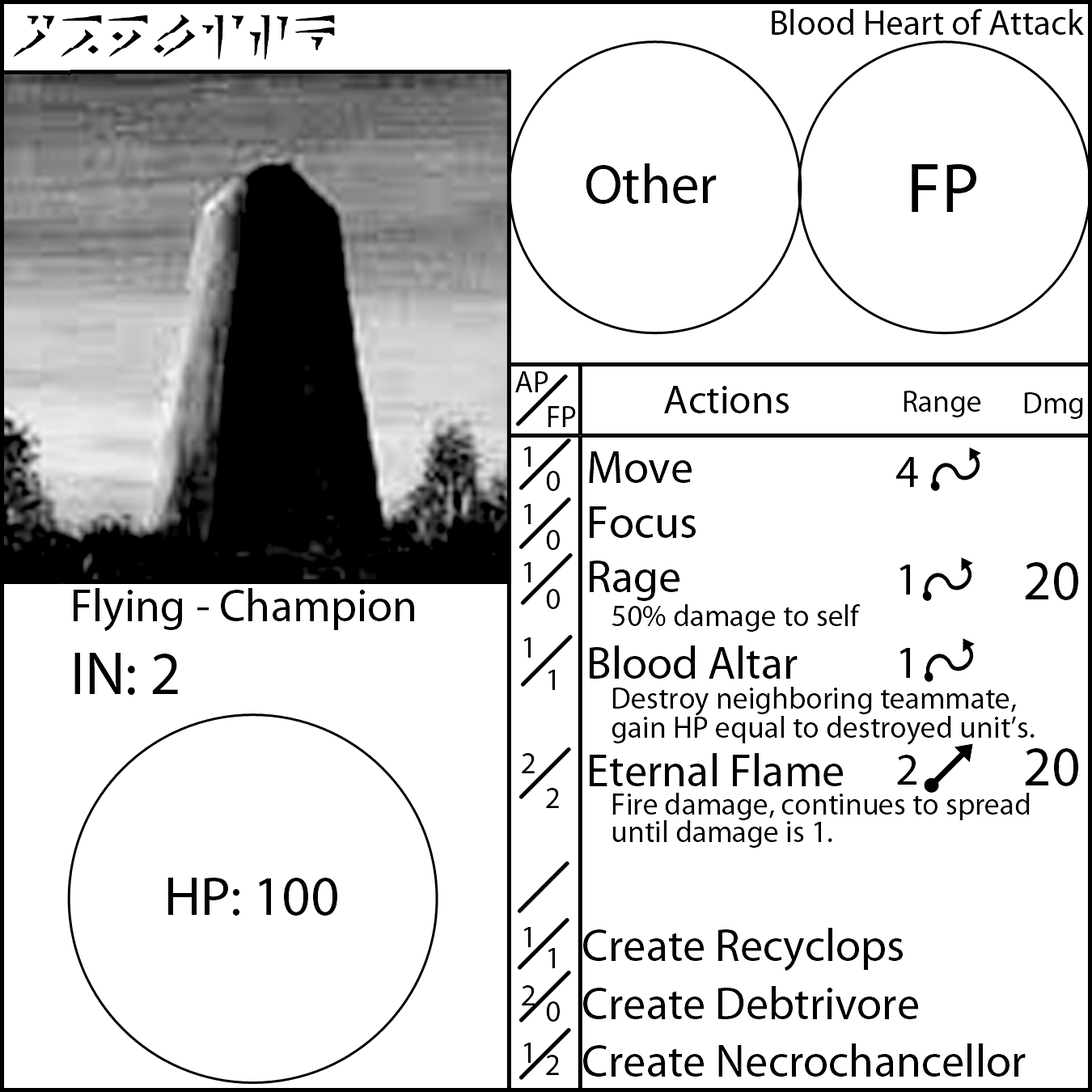
<style>
.page{position:relative;width:1092px;height:1092px;background:#ffffff}
.page>*{position:absolute;margin:0}
.t1{font:55.6px "Dovahkiin";color:#000000}
.t2{font:35.4px "MyriadPro-Regular";color:#000000}
.t3{font:55.6px "MyriadPro-Regular";color:#000000}
.t4{font:70.8px "MyriadPro-Regular";color:#000000}
.t5{font:30.3px "MyriadPro-Regular";color:#000000}
.t6{font:40.4px "MyriadPro-Regular";color:#000000}
.t7{font:45.5px "MyriadPro-Regular";color:#000000}
.t8{font:60.7px "MyriadPro-Regular";color:#000000}
</style>
<div class="page">
<p class="t1" style="left:14px;top:14px;width:321px;height:46px">obelisk</p>
<p class="t2" style="left:772px;top:9px;width:312px;height:26px">Blood Heart of Attack</p>
<p class="t3" style="left:586px;top:163px;width:131px;height:41px">Other</p>
<p class="t4" style="left:912px;top:164px;width:64px;height:48px">FP</p>
<p class="t5" style="left:515px;top:371px;width:33px;height:21px">AP</p>
<p class="t6" style="left:664px;top:386px;width:125px;height:27px">Actions</p>
<p class="t5" style="left:904px;top:391px;width:77px;height:26px">Range</p>
<p class="t5" style="left:1024px;top:392px;width:59px;height:27px">Dmg</p>
<p class="t5" style="left:548px;top:406px;width:28px;height:21px">FP</p>
<p class="t5" style="left:522px;top:447px;width:13px;height:616px">1<br>1<br>1 <br>1<br><br>2<br><br><br>1<br>2<br>1</p>
<p class="t5" style="left:583px;top:451px;width:452px;height:626px"><span class="t7">Move<br>Focus<br>Rage<br></span> 50% damage to self<br><span class="t7">Blood Altar<br></span> Destroy neighboring teammate, <br> gain HP equal to destroyed unit’s.<br><span class="t7">Eternal Flame<br></span> Fire damage, continues to spread <br> until damage is 1.<br><br><br><span class="t7">Create Recyclops<br>Create Debtrivore<br>Create Necrochancellor</span></p>
<p class="t7" style="left:896px;top:457px;width:22px;height:328px;text-align:center">4<br><br>1 <br>1<br><br>2</p>
<p class="t5" style="left:546px;top:471px;width:14px;height:604px">0<br>0<br>0<br>1<br><br>2<br><br><br>1<br>0<br>2</p>
<p class="t3" style="left:1025px;top:562px;width:53px;height:224px;text-align:center">20<br> <br>20</p>
<p class="t7" style="left:74px;top:588px;width:340px;height:107px">Flying - Champion<br><span class="t8">IN: 2</span></p>
<p class="t3" style="left:168px;top:878px;width:169px;height:38px">HP: 100</p>
</div>
